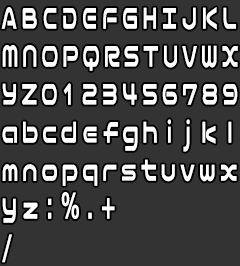
<style>
.page{position:relative;width:240px;height:266px;background:#333333}
.page>*{position:absolute;margin:0}
.t1{font:36px/38px "NicoKaku";letter-spacing:0.23em;color:#ffffff;scale:0.58 1}
.t2{font:36px/38px "NicoKaku";letter-spacing:0.17em;color:#ffffff;scale:0.58 1}
.t3{font:36px/38px "NicoKaku";letter-spacing:0.18em;color:#ffffff;scale:0.58 1}
.t4{font:36px/38px "NicoKaku";letter-spacing:0.245em;color:#ffffff;scale:0.58 1}
.t5{font:36px/38px "NicoKaku";letter-spacing:0.165em;color:#ffffff;scale:0.58 1}
.t6{font:36px/38px "NicoKaku";letter-spacing:0.425em;color:#ffffff;scale:0.58 1}
.t7{font:36px/38px "NicoKaku";letter-spacing:0.645em;color:#ffffff;scale:0.58 1}
.t8{font:36px/38px "NicoKaku";letter-spacing:0.505em;color:#ffffff;scale:0.58 1}
.t9{font:36px/38px "NicoKaku";letter-spacing:0.19em;color:#ffffff;scale:0.58 1}
.t10{font:36px/40px "NicoKaku";letter-spacing:0.25em;color:#ffffff;scale:0.58 1}
.t11{font:36px/42px "NicoKaku";letter-spacing:0.33em;color:#ffffff;scale:0.58 1}
.t12{font:36px/38px "NicoKaku";letter-spacing:0.22em;color:#ffffff;scale:0.58 1}
</style>
<div class="page">
<p class="t1" style="left:1px;top:7px;width:237px;height:256px">ABCDEFGHIJKL<br><span class="t2">MNOPQRSTUVWX<br></span><span class="t3">YZ0123456789<br></span><span class="t2">abc</span><span class="t4">de</span><span class="t5">fg</span><span class="t6">h</span><span class="t7">i</span><span class="t8">jkl<br></span><span class="t2">mnopq</span><span class="t9">rstuvwx<br></span><span class="t10">y</span><span class="t11">z:%.+<br></span><span class="t12">/</span></p>
</div>
